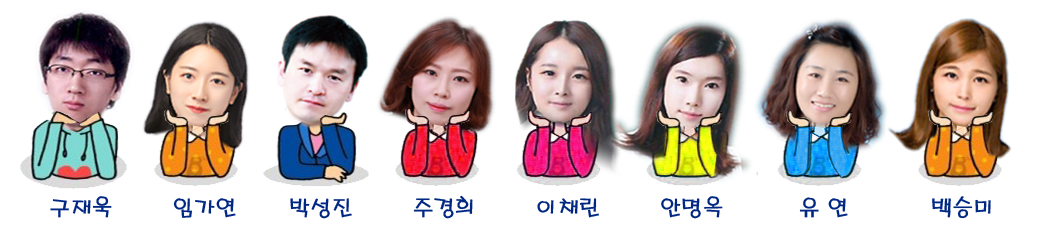
<style>
.page{position:relative;width:1048px;height:228px;background:#ffffff}
.page>*{position:absolute;margin:0}
.t1{font:22px "H2porL";color:#002883;font-weight:bold;scale:0.94 1}
</style>
<div class="page">
<p class="t1" style="left:50px;top:195px;width:941px;height:24px">구재욱        임가연       박성진        주경희        이채린        안명옥          유 연           백승미</p>
</div>
